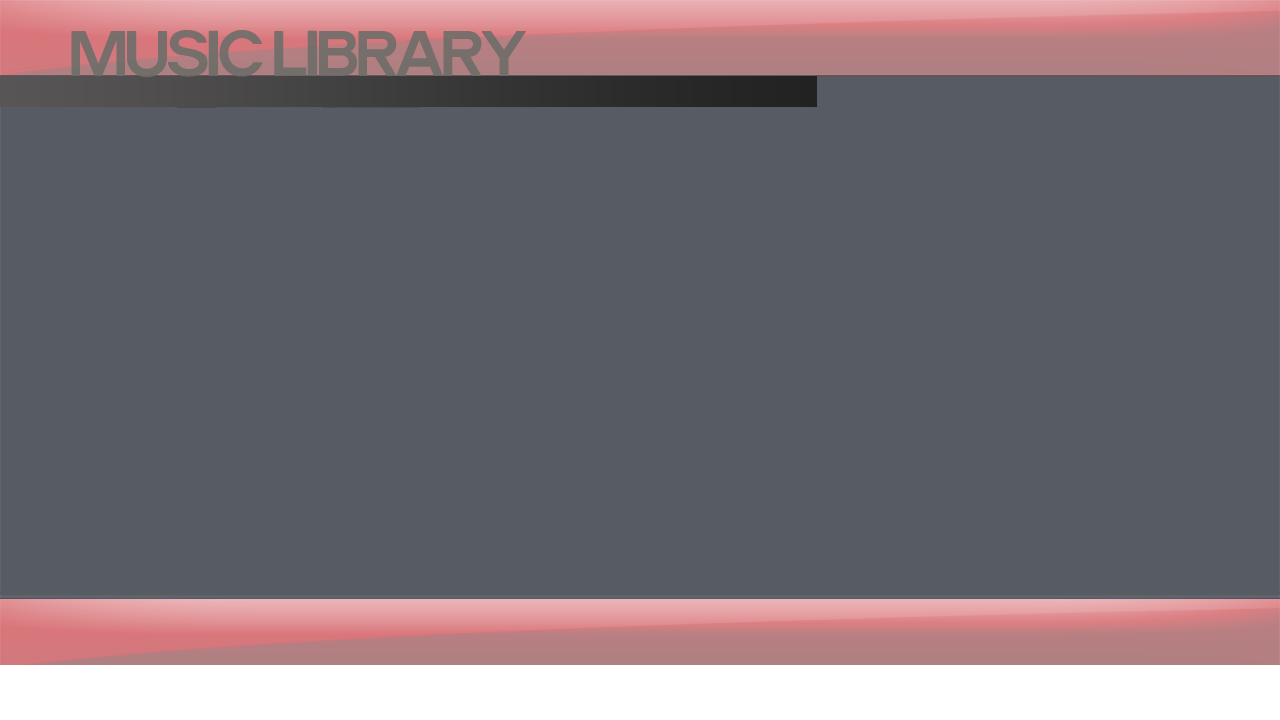
<style>
.page{position:relative;width:1280px;height:720px;background:#575b63}
.page>*{position:absolute;margin:0}
.t1{font:72px "Pentatonic";letter-spacing:-0.075em;color:#6e6d6a;font-weight:bold}
</style>
<div class="page">
<p class="t1" style="left:71px;top:30px;width:455px;height:48px;opacity:0.9">MUSIC LIBRARY</p>
</div>
